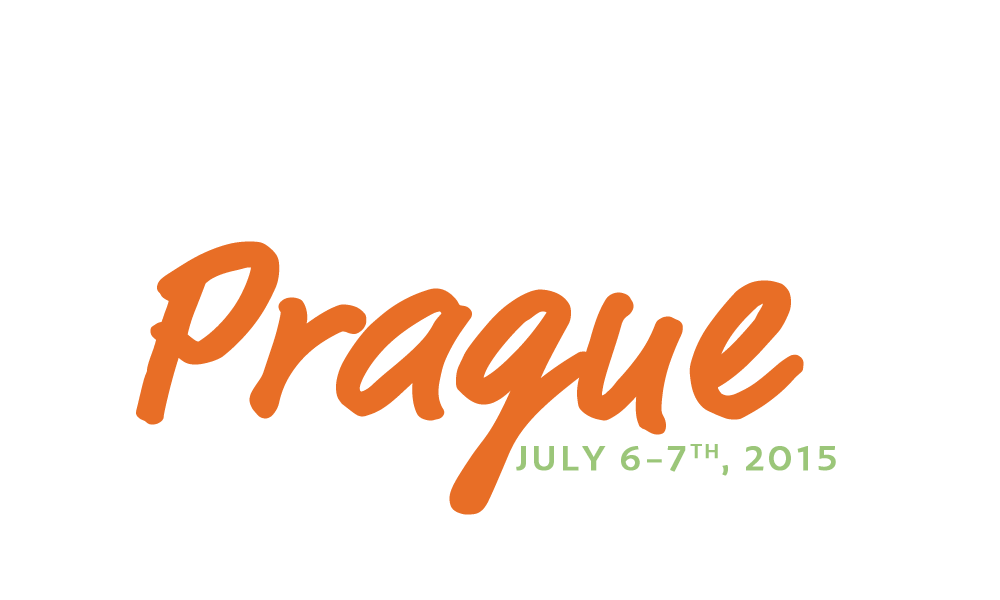
<style>
.page{position:relative;width:1000px;height:600px;background:#ffffff}
.page>*{position:absolute;margin:0}
.t1{font:250px "MarketWeb";color:#e86e26;font-weight:bold}
.t2{font:36px "PetalaPro";letter-spacing:0.07em;color:#9bc679;font-weight:bold}
</style>
<div class="page">
<p class="t1" style="left:136px;top:241px;width:668px;height:274px">Prague</p>
<p class="t2" style="left:516px;top:444px;width:320px;height:32px">JULY 6-7TH, 2015</p>
</div>
